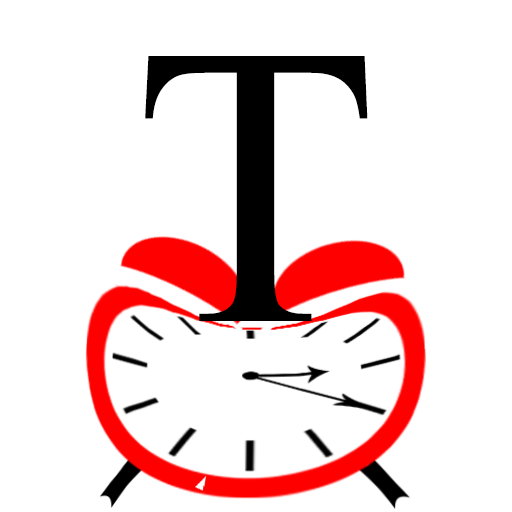
<style>
.page{position:relative;width:512px;height:512px;background:#ffffff}
.page>*{position:absolute;margin:0}
.t1{font:400px "TimesNewRomanPSMT";color:#000000}
.t2{font:322px "TimesNewRomanPSMT";color:#000000}
</style>
<div class="page">
<p class="t1" style="left:145px;top:56px;width:223px;height:265px">T<span class="t2">T</span></p>
</div>
